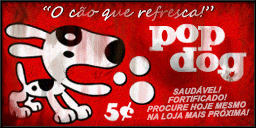
<style>
.page{position:relative;width:256px;height:128px}
.page>*{position:absolute;margin:0}
.t1{font:14.7px "SegoeScript";letter-spacing:0.02em;font-style:italic}
.t2{font:8px/8px "Arial-BoldItalicMT";letter-spacing:0.02em;color:#d9adad;text-transform:uppercase;font-style:italic}
</style>
<div class="page">
<p class="t1" style="left:43px;top:5px;width:171px;height:16px">“O cão que refresca!”</p>
<p class="t2" style="left:147px;top:85px;width:103px;height:35px;text-align:center;rotate:-3deg">Saudável!<br>Fortificado!<br>Procure hoje mesmo <br>na loja mais próxima!</p>
</div>
